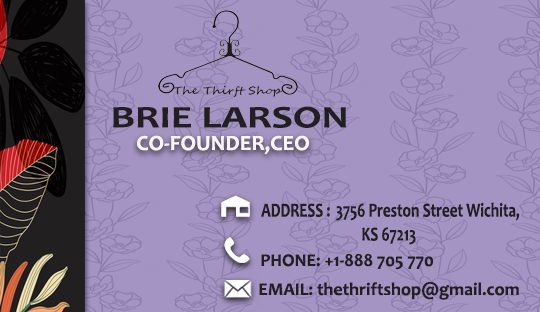
<style>
.page{position:relative;width:540px;height:312px;background:#a494c3}
.page>*{position:absolute;margin:0}
.t1{font:31.5px "Candara-Bold";color:#211f20;scale:1.3 1}
.t2{font:21.8px "Candara-Bold";color:#f9f6f6}
.t3{font:27.2px "Candara-Bold";color:#211f20}
.t4{font:19.9px "Candara-Bold";color:#211f20;scale:0.76 1}
.t5{font:18px "Candara-Bold";color:#211f20}
</style>
<div class="page">
<p class="t1" style="left:113px;top:106px;width:233px;height:22px">BRIE LARSON</p>
<p class="t2" style="left:137px;top:135px;width:172px;height:20px"><span class="t3"><br></span>CO-FOUNDER,CEO</p>
<p class="t4" style="left:261px;top:202px;width:259px;height:43px;text-align:center">ADDRESS : 3756 Preston Street Wichita,<br>KS 67213</p>
<p class="t5" style="left:261px;top:253px;width:172px;height:17px">PHONE: +1-888 705 770</p>
<p class="t5" style="left:259px;top:282px;width:260px;height:18px">EMAIL: thethriftshop@gmail.com</p>
</div>
